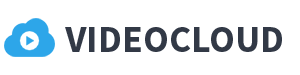
<style>
.page{position:relative;width:300px;height:75px;background:#ffffff}
.page>*{position:absolute;margin:0}
.t1{font:38px "SourceSansPro-Bold";color:#323946}
</style>
<div class="page">
<p class="t1" style="left:65px;top:27px;width:217px;height:25px">VIDEOCLOUD</p>
</div>
